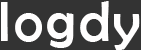
<style>
.page{position:relative;width:141px;height:50px;background:#333333}
.page>*{position:absolute;margin:0}
.t1{font:57.4px "BerlinSansFB-Reg";letter-spacing:0.05em;color:#fffefe}
</style>
<div class="page">
<p class="t1" style="left:1px;top:1px;width:139px;height:49px">logdy</p>
</div>
